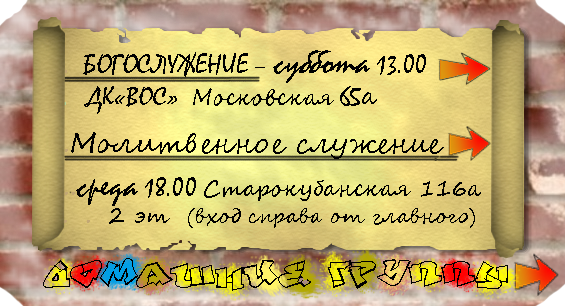
<style>
.page{position:relative;width:565px;height:306px}
.page>*{position:absolute;margin:0}
.t1{font:20px "SegoeScript";color:#000000}
.t2{font:28px "Mistral";color:#c3a874}
.t3{font:28px "Mistral";color:#000000}
.t4{font:36px "Mistral";color:#000000}
.t5{font:27px "Mistral";color:#000000}
.t6{font:22px "Mistral";color:#b7d499}
.t7{font:22px "SegoeScript";color:#000000}
.t8{font:27px "SegoeScript";color:#000000}
.t9{font:28px "SegoeScript";color:#c3a874}
.t10{font:28px "SegoeScript";color:#000000}
.t11{font:22px "SegoeScript";color:#c3a874}
.t12{font:48px "DefWriter|BASECyr";color:#000000}
</style>
<div class="page">
<p class="t1" style="left:64px;top:50px;width:417px;height:178px"><span class="t2">.</span><span class="t3">  БОГОСЛУЖЕНИЕ – </span><span class="t4">суббота </span><span class="t5">13.00               </span><span class="t6">. </span><span class="t5">  ДК«ВОС»  </span><span class="t7">Московская</span><span class="t5"> 65</span><span class="t8">а<br><br><br></span><span class="t9">.</span><span class="t10">Молитвенное служение -  </span><span class="t9">..</span><span class="t4">среда</span><span class="t5"> 18.00 </span><span class="t7">Старокубанская 116а   </span><span class="t11">.  .  </span><span class="t7">2 эт  </span>(вход справа от главного)</p>
<p class="t12" style="left:43px;top:258px;width:465px;height:33px">Домашние группы</p>
</div>
